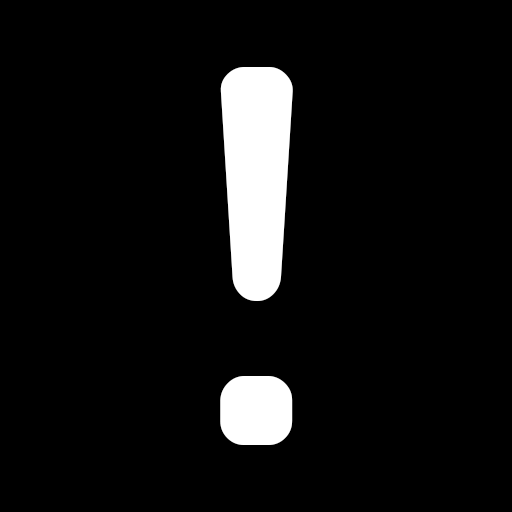
<style>
.page{position:relative;width:512px;height:512px;background:#000000}
.page>*{position:absolute;margin:0}
.t1{font:583.3px "OCRAExtended";color:#ffffff}
</style>
<div class="page">
<p class="t1" style="left:220px;top:67px;width:73px;height:378px">!</p>
</div>
